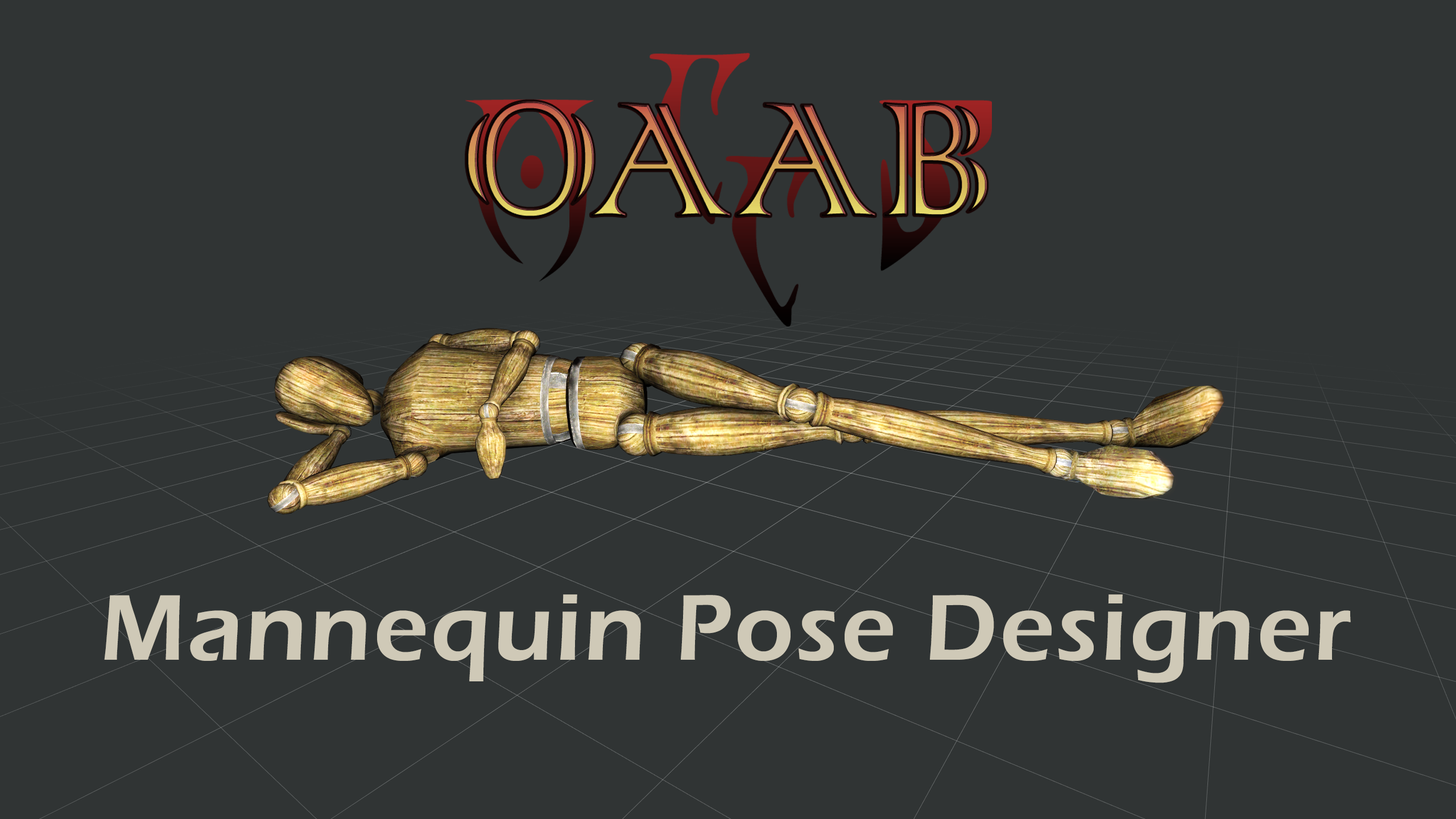
<style>
.page{position:relative;width:1456px;height:819px;background:#303434}
.page>*{position:absolute;margin:0}
.t1{font:96.7px "ErasITC-Demi";letter-spacing:0.025em;color:#cfc9b7}
</style>
<div class="page">
<p class="t1" style="left:104px;top:594px;width:1247px;height:89px">Mannequin Pose Designer</p>
</div>
